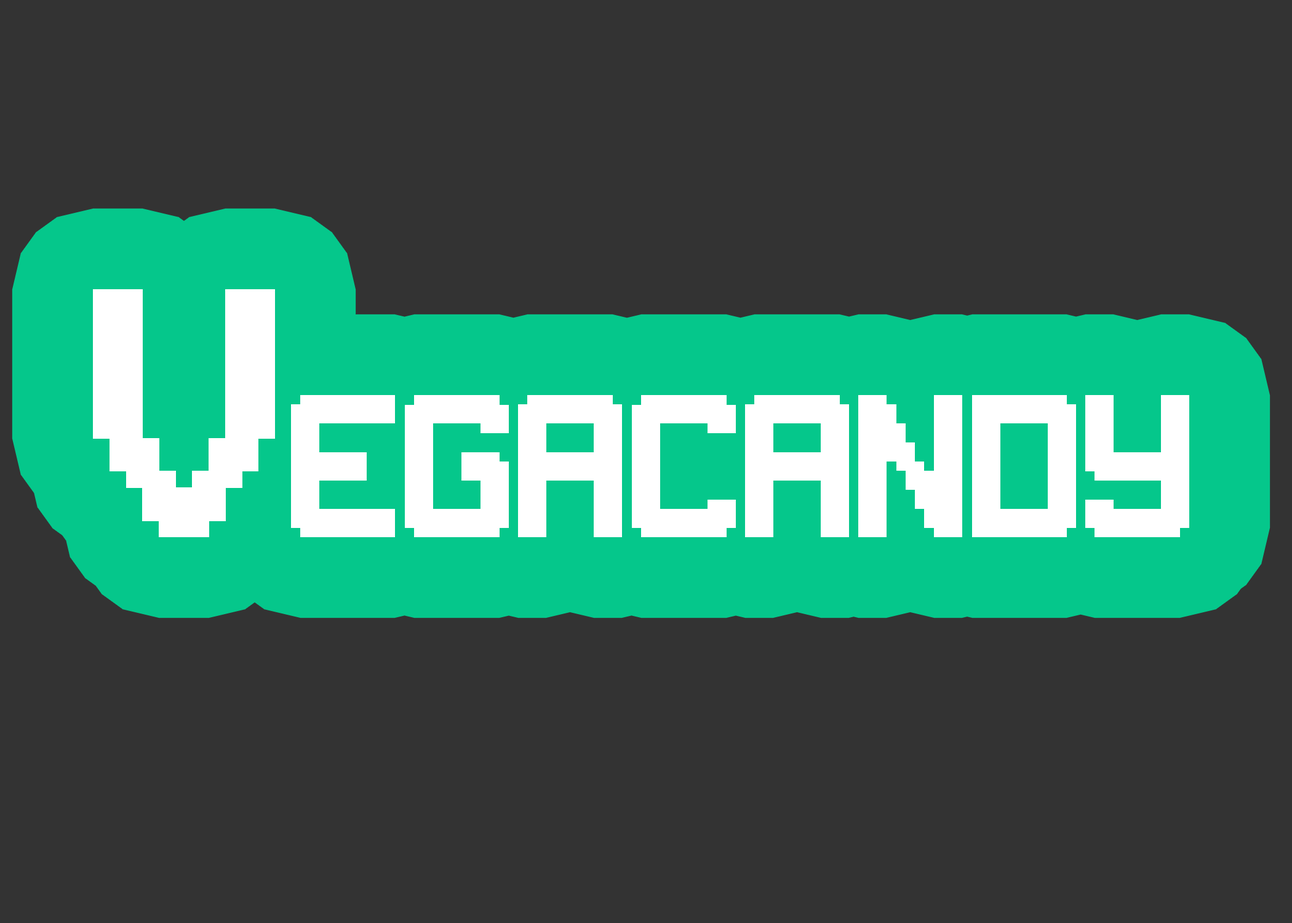
<style>
.page{position:relative;width:1292px;height:923px;background:#333333}
.page>*{position:absolute;margin:0}
.t1{font:151.3px "GAMEPLAY-1987";color:#ffffff}
.t2{font:264.1px "GAMEPLAY-1987";color:#ffffff}
</style>
<div class="page">
<p class="t1" style="left:93px;top:289px;width:1096px;height:248px"><span class="t2">V</span>EGACANDY</p>
</div>
